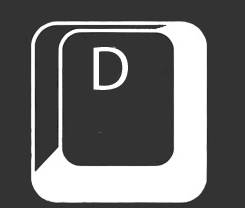
<style>
.page{position:relative;width:245px;height:208px;background:#333333}
.page>*{position:absolute;margin:0}
.t1{font:62px "MyriadPro-Regular";color:#ffffff}
</style>
<div class="page">
<p class="t1" style="left:93px;top:47px;width:35px;height:43px">D</p>
</div>
